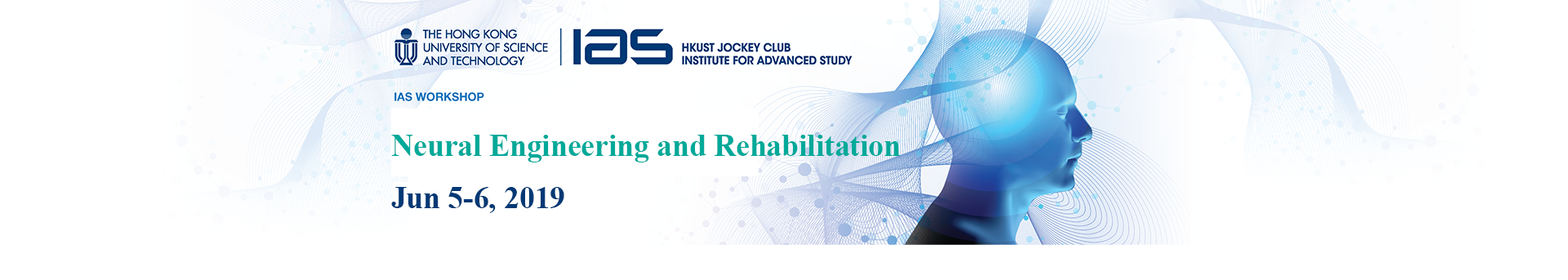
<style>
.page{position:relative;width:1568px;height:280px;background:#ffffff}
.page>*{position:absolute;margin:0}
.t1{font:30.6px "TimesNewRomanPS-BoldMT";color:#00a999}
.t2{font:30.6px "TimesNewRomanPS-BoldMT";color:#003975}
</style>
<div class="page">
<p class="t1" style="left:391px;top:135px;width:509px;height:28px">Neural Engineering and Rehabilitation</p>
<p class="t2" style="left:391px;top:187px;width:173px;height:26px">Jun 5-6, 2019</p>
</div>
